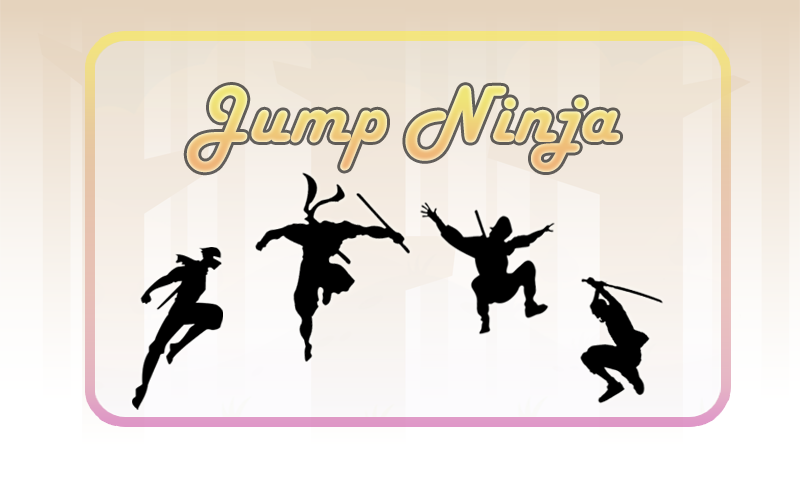
<style>
.page{position:relative;width:800px;height:480px}
.page>*{position:absolute;margin:0}
.t1{font:83.7px "HarlowSolid"}
</style>
<div class="page">
<p class="t1" style="left:186px;top:85px;width:434px;height:88px">Jump Ninja</p>
</div>
